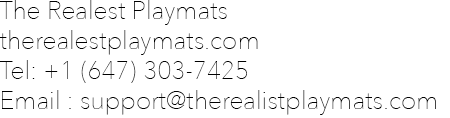
<style>
.page{position:relative;width:450px;height:118px;background:#ffffff}
.page>*{position:absolute;margin:0}
.t1{font:25px "AvenirNext-UltraLight";color:#000000}
</style>
<div class="page">
<p class="t1" style="left:0px;top:0px;width:436px;height:115px">The Realest Playmats<br>therealestplaymats.com<br>Tel: +1 (647) 303-7425<br>Email : support@therealistplaymats.com</p>
</div>
